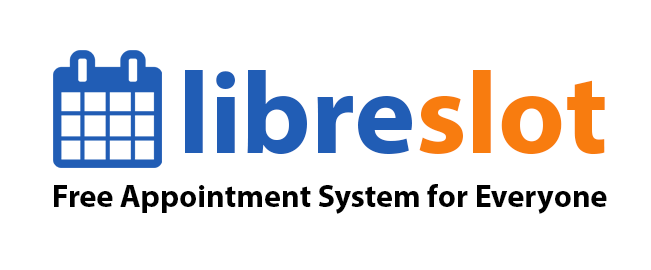
<style>
.page{position:relative;width:651px;height:270px;background:#ffffff}
.page>*{position:absolute;margin:0}
.t1{font:116.2px "MyriadPro-Bold";color:#215db5}
.t2{font:116.2px "MyriadPro-Bold";color:#f87c0f}
.t3{font:32px "MyriadPro-Bold";color:#000000}
</style>
<div class="page">
<p class="t1" style="left:185px;top:70px;width:420px;height:85px">libre<span class="t2">slot</span></p>
<p class="t3" style="left:54px;top:184px;width:553px;height:30px">Free Appointment System for Everyone</p>
</div>
